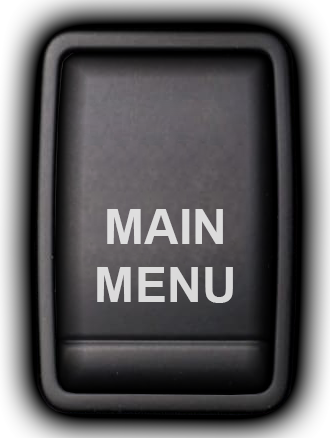
<style>
.page{position:relative;width:330px;height:438px}
.page>*{position:absolute;margin:0}
.t1{font:48.2px "Arial-BoldMT";color:#dcdbdc}
</style>
<div class="page">
<p class="t1" style="left:97px;top:209px;width:136px;height:94px;text-align:center">MAIN<br>MENU</p>
</div>
